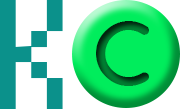
<style>
.page{position:relative;width:180px;height:109px;background:#ffffff}
.page>*{position:absolute;margin:0}
.t1{font:160px "Munro";color:#0b918b}
.t2{font:89.9px "Comfortaa-Bold"}
</style>
<div class="page">
<p class="t1" style="left:0px;top:0px;width:63px;height:109px">K</p>
<p class="t2" style="left:96px;top:21px;width:53px;height:65px">C</p>
</div>
